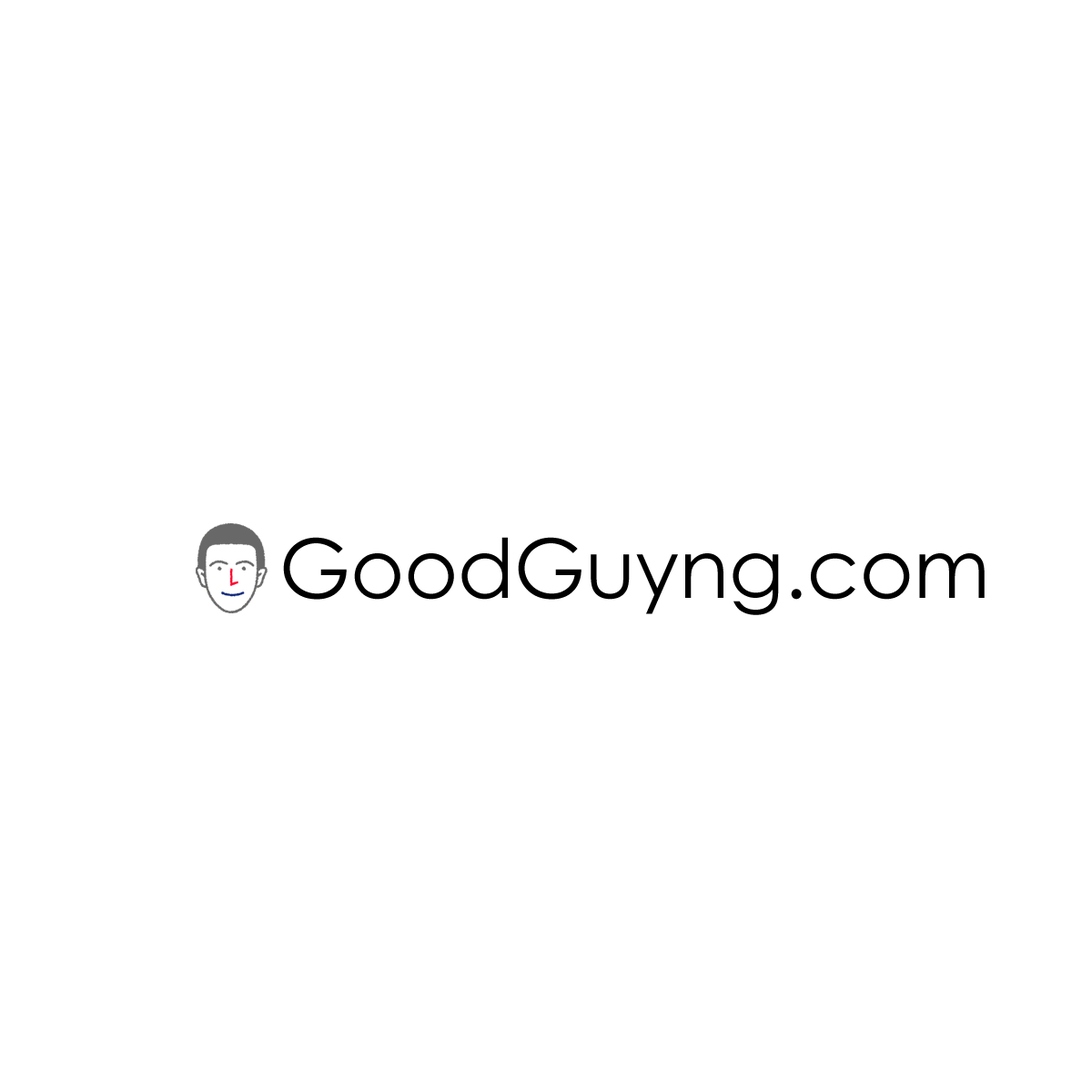
<style>
.page{position:relative;width:1092px;height:1092px;background:#ffffff}
.page>*{position:absolute;margin:0}
.t1{font:81.9px "CenturyGothic";color:#000000}
</style>
<div class="page">
<p class="t1" style="left:283px;top:537px;width:702px;height:78px">GoodGuyng.com</p>
</div>
